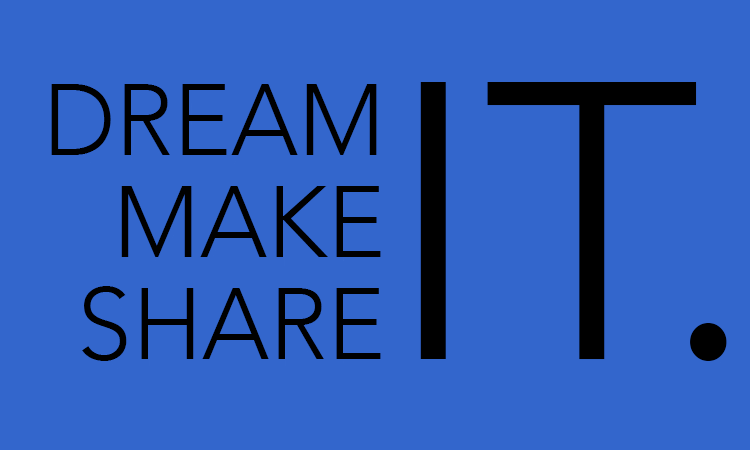
<style>
.page{position:relative;width:750px;height:450px;background:#3366cc}
.page>*{position:absolute;margin:0}
.t1{font:100.4px "Avenir-Light";color:#000000}
.t2{font:390.6px "Avenir-Light";color:#000000}
</style>
<div class="page">
<p class="t1" style="left:51px;top:84px;width:326px;height:71px">DREAM</p>
<p class="t2" style="left:420px;top:82px;width:307px;height:279px">IT.</p>
<p class="t1" style="left:121px;top:186px;width:260px;height:71px">MAKE</p>
<p class="t1" style="left:82px;top:286px;width:299px;height:75px">SHARE</p>
</div>
